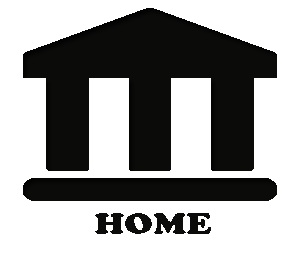
<style>
.page{position:relative;width:300px;height:254px;background:#ffffff}
.page>*{position:absolute;margin:0}
.t1{font:29.6px "CooperBlackStd";color:#0c0c0b;scale:1.2 1}
</style>
<div class="page">
<p class="t1" style="left:95px;top:213px;width:116px;height:21px">HOME</p>
</div>
